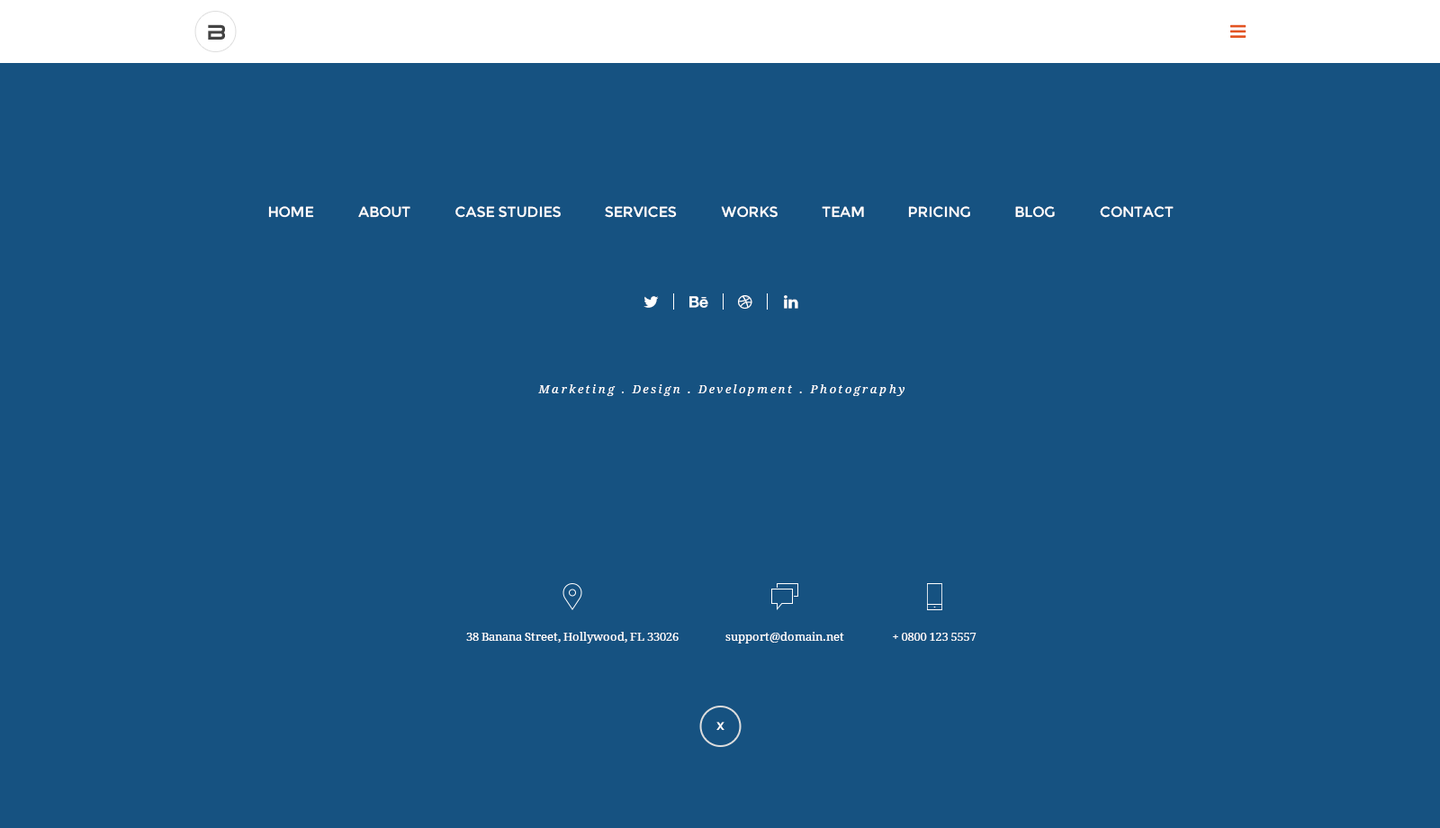
<style>
.page{position:relative;width:1440px;height:828px;background:#165281}
.page>*{position:absolute;margin:0}
.t1{font:21.6px "Tele-MarinesBold";color:#444444}
.t2{font:14.4px "Montserrat-Regular";color:#ffffff}
.t3{font:11.7px "DroidSerif-Italic";letter-spacing:0.2em;color:#ffffff}
.t4{font:11.7px "DroidSerif";color:#ffffff}
</style>
<div class="page">
<p class="t1" style="left:208px;top:24px;width:17px;height:16px">B</p>
<p class="t2" style="left:268px;top:206px;width:46px;height:12px">HOME</p>
<p class="t2" style="left:358px;top:206px;width:52px;height:12px">ABOUT</p>
<p class="t2" style="left:455px;top:206px;width:106px;height:12px">CASE STUDIES</p>
<p class="t2" style="left:605px;top:206px;width:72px;height:12px">SERVICES</p>
<p class="t2" style="left:721px;top:206px;width:57px;height:12px">WORKS</p>
<p class="t2" style="left:822px;top:206px;width:42px;height:12px">TEAM</p>
<p class="t2" style="left:908px;top:206px;width:62px;height:12px">PRICING</p>
<p class="t2" style="left:1015px;top:206px;width:40px;height:12px">BLOG</p>
<p class="t2" style="left:1100px;top:206px;width:74px;height:12px">CONTACT</p>
<p class="t3" style="left:538px;top:384px;width:367px;height:12px">Marketing . Design . Development . Photography</p>
<p class="t4" style="left:466px;top:632px;width:213px;height:12px">38 Banana Street, Hollywood, FL 33026</p>
<p class="t4" style="left:725px;top:632px;width:119px;height:12px">support@domain.net</p>
<p class="t4" style="left:893px;top:633px;width:84px;height:8px">+ 0800 123 5557</p>
<p class="t2" style="left:716px;top:722px;width:9px;height:9px">x</p>
</div>
